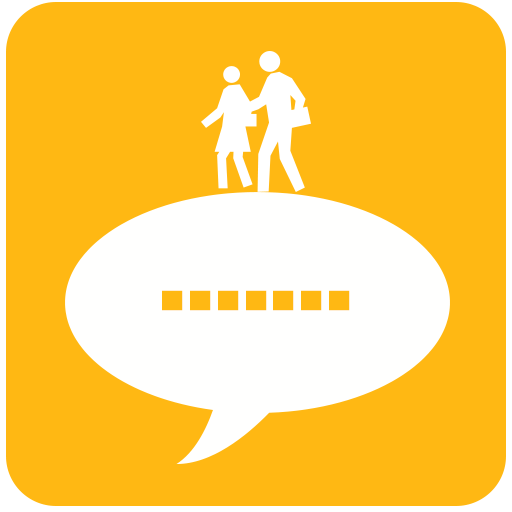
<style>
.page{position:relative;width:512px;height:512px;background:#ffb813}
.page>*{position:absolute;margin:0}
.t1{font:100px "FZLTTHB--B51-0";color:#ffb813}
</style>
<div class="page">
<p class="t1" style="left:162px;top:290px;width:188px;height:21px">.......</p>
</div>
